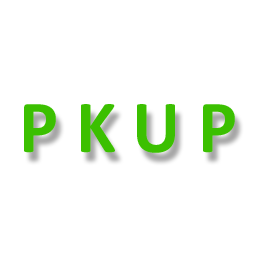
<style>
.page{position:relative;width:256px;height:256px;background:#ffffff}
.page>*{position:absolute;margin:0}
.t1{font:75.6px "Calibri-Bold";letter-spacing:0.24em;color:#3bc000}
</style>
<div class="page">
<p class="t1" style="left:24px;top:104px;width:211px;height:49px">PKUP</p>
</div>
